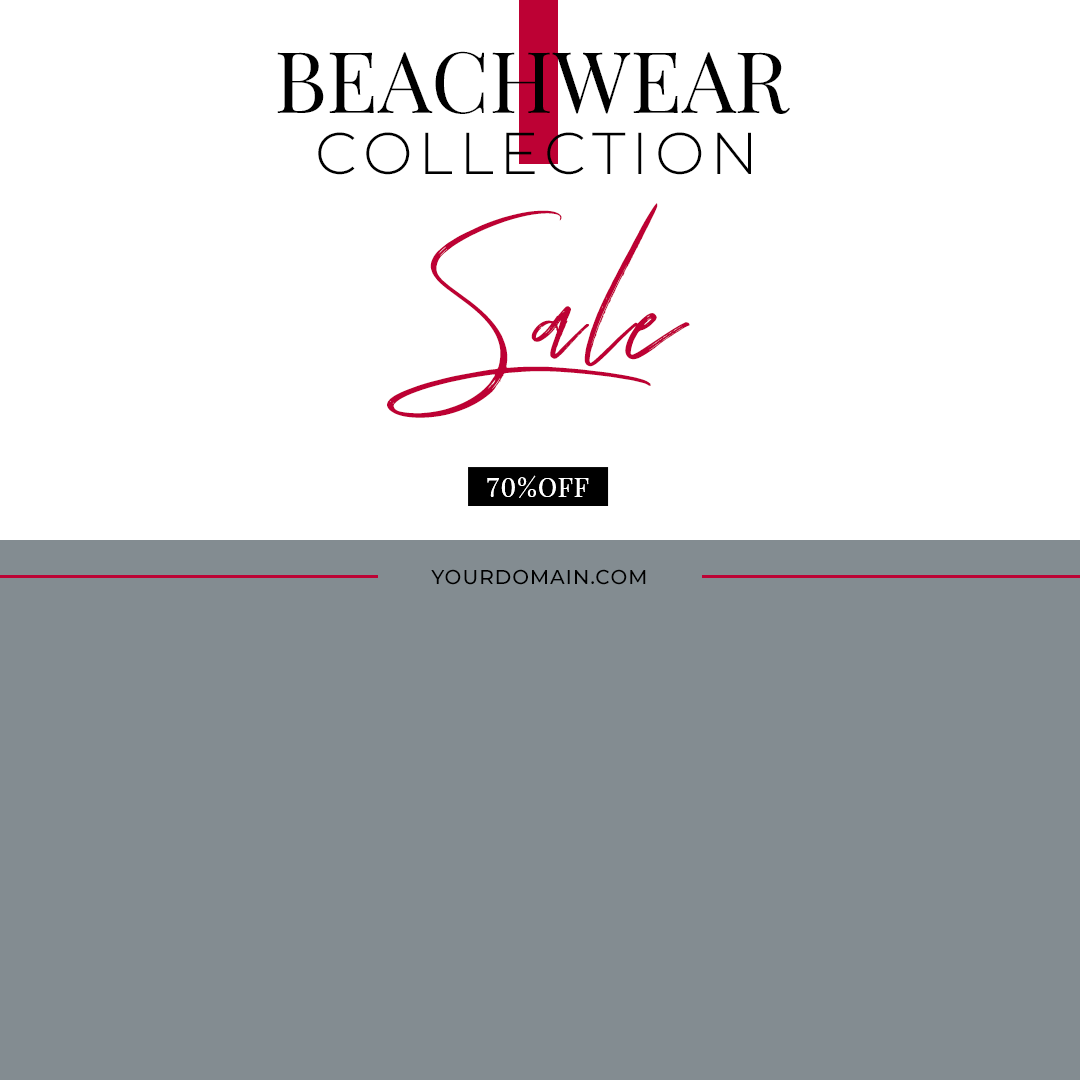
<style>
.page{position:relative;width:1080px;height:1080px;background:#838c91}
.page>*{position:absolute;margin:0}
.t1{font:85px "PlayfairDisplay-Regular";color:#000000;text-transform:uppercase}
.t2{font:59px "Montserrat-Light";letter-spacing:0.1em;color:#000000;text-transform:uppercase}
.t3{font:149.2px "TuesdayNight-Regular";letter-spacing:0.05em;color:#bd0134}
.t4{font:25.4px "PlayfairDisplay-Regular";letter-spacing:0.05em;color:#ffffff;text-transform:uppercase}
.t5{font:20px "Montserrat-Medium";letter-spacing:0.05em;color:#000000;text-transform:uppercase}
</style>
<div class="page">
<p class="t1" style="left:277px;top:51px;width:513px;height:63px">Beachwear</p>
<p class="t2" style="left:318px;top:132px;width:433px;height:43px">Collection</p>
<p class="t3" style="left:387px;top:203px;width:303px;height:215px">Sale</p>
<p class="t4" style="left:487px;top:475px;width:102px;height:23px">70%Off</p>
<p class="t5" style="left:431px;top:569px;width:215px;height:16px">Yourdomain.com</p>
</div>
